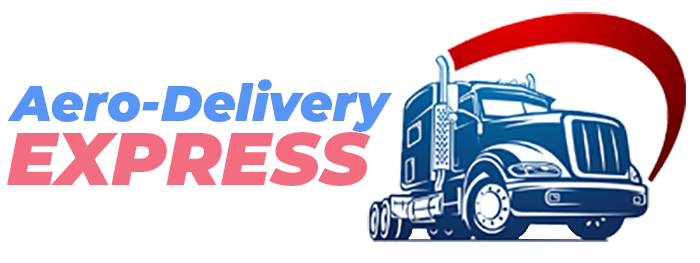
<style>
.page{position:relative;width:700px;height:263px;background:#ffffff}
.page>*{position:absolute;margin:0}
.t1{font:50.6px "Montserrat-BlackItalic";color:#5894f3}
.t2{font:74.3px "Montserrat-BlackItalic";color:#f16d7f}
</style>
<div class="page">
<p class="t1" style="left:7px;top:79px;width:385px;height:53px">Aero-Delivery</p>
<p class="t2" style="left:7px;top:132px;width:364px;height:54px">EXPRESS</p>
</div>
